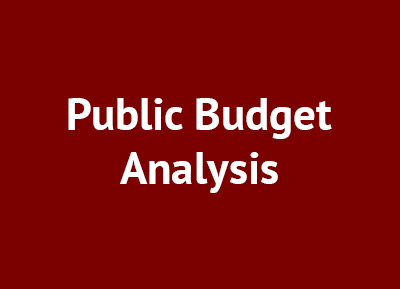
<style>
.page{position:relative;width:400px;height:289px;background:#7b0000}
.page>*{position:absolute;margin:0}
.t1{font:45px "PTSans-Bold";color:#ffffff}
</style>
<div class="page">
<p class="t1" style="left:68px;top:98px;width:264px;height:95px;text-align:center">Public Budget<br>Analysis</p>
</div>
